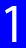
<style>
.page{position:relative;width:26px;height:48px;background:#0000ff}
.page>*{position:absolute;margin:0}
.t1{font:47.6px "KozGoPr6N-Regular";color:#ffffff}
</style>
<div class="page">
<p class="t1" style="left:5px;top:6px;width:12px;height:36px">1</p>
</div>
